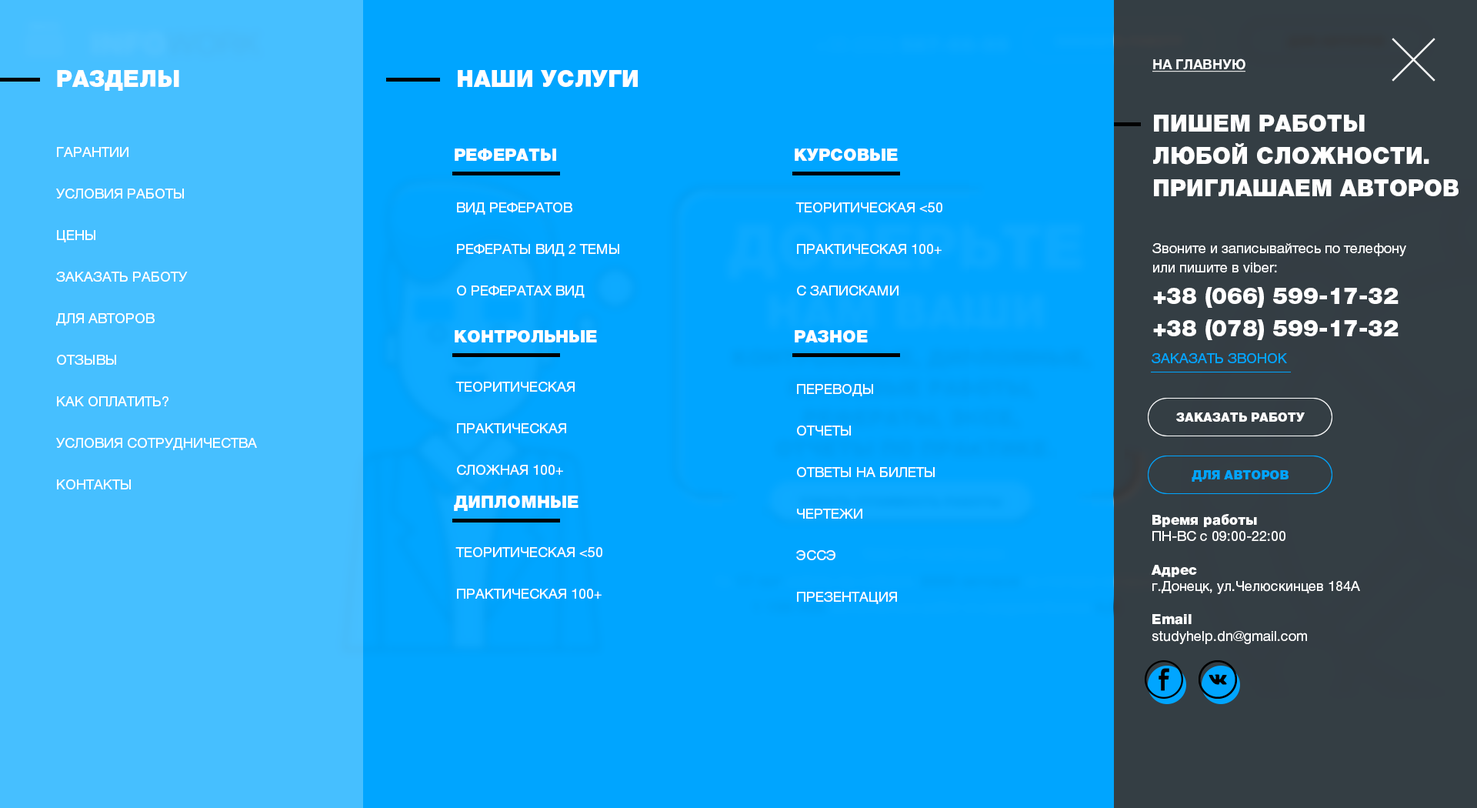
<style>
.page{position:relative;width:1477px;height:808px;background:#00a5ff}
.page>*{position:absolute;margin:0}
.t1{font:13.8px "HelveticaNeueCyr-Bold";color:#ffffff;text-decoration:underline}
.t2{font:23.1px "HelveticaNeueCyr-Black";color:#ffffff}
.t3{font:23.1px/32.3px "HelveticaNeueCyr-Black";color:#ffffff}
.t4{font:13.8px/41.5px "HelveticaNeueCyr-Roman";color:#ffffff}
.t5{font:16.9px "HelveticaNeueCyr-Black";color:#ffffff}
.t6{font:13.8px/19.4px "HelveticaNeueCyr-Roman";color:#ffffff}
.t7{font:13.8px "HelveticaNeueCyr-Roman";color:#00a5ff}
.t8{font:12.3px "HelveticaNeueCyr-Black";color:#ffffff}
.t9{font:12.3px "HelveticaNeueCyr-Black";color:#00a5ff}
.t10{font:13.8px/16.6px "HelveticaNeueCyr-Roman";color:#ffffff}
.t11{font:13.8px/16.6px "HelveticaNeueCyr-Black";color:#ffffff}
</style>
<div class="page">
<p class="t1" style="left:1152px;top:58px;width:93px;height:14px">НА ГЛАВНУЮ</p>
<p class="t2" style="left:57px;top:70px;width:122px;height:21px">РАЗДЕЛЫ</p>
<p class="t2" style="left:458px;top:70px;width:180px;height:17px">НАШИ УСЛУГИ</p>
<p class="t3" style="left:1153px;top:115px;width:305px;height:81px">ПИШЕМ РАБОТЫ ЛЮБОЙ СЛОЖНОСТИ.<br>ПРИГЛАШАЕМ АВТОРОВ</p>
<p class="t4" style="left:56px;top:147px;width:201px;height:342px">ГАРАНТИИ<br>УСЛОВИЯ РАБОТЫ<br>ЦЕНЫ<br>ЗАКАЗАТЬ РАБОТУ<br>ДЛЯ АВТОРОВ<br>ОТЗЫВЫ<br>КАК ОПЛАТИТЬ?<br>УСЛОВИЯ СОТРУДНИЧЕСТВА<br>КОНТАКТЫ</p>
<p class="t5" style="left:455px;top:148px;width:101px;height:13px">РЕФЕРАТЫ</p>
<p class="t5" style="left:794px;top:148px;width:104px;height:13px">КУРСОВЫЕ</p>
<p class="t4" style="left:457px;top:202px;width:162px;height:96px">ВИД РЕФЕРАТОВ <br>РЕФЕРАТЫ ВИД 2 ТЕМЫ<br>О РЕФЕРАТАХ ВИД</p>
<p class="t4" style="left:795px;top:202px;width:147px;height:93px">ТЕОРИТИЧЕСКАЯ &lt;50 <br>ПРАКТИЧЕСКАЯ 100+<br>С ЗАПИСКАМИ</p>
<p class="t6" style="left:1152px;top:243px;width:254px;height:30px">Звоните и записывайтесь по телефону<br>или пишите в viber:</p>
<p class="t2" style="left:1153px;top:287px;width:245px;height:21px">+38 (066) 599-17-32</p>
<p class="t5" style="left:455px;top:330px;width:142px;height:12px">КОНТРОЛЬНЫЕ</p>
<p class="t5" style="left:794px;top:330px;width:74px;height:12px">РАЗНОЕ</p>
<p class="t2" style="left:1153px;top:319px;width:245px;height:21px">+38 (078) 599-17-32</p>
<p class="t7" style="left:1151px;top:353px;width:136px;height:10px">ЗАКАЗАТЬ ЗВОНОК</p>
<p class="t4" style="left:455px;top:381px;width:120px;height:94px">ТЕОРИТИЧЕСКАЯ <br>ПРАКТИЧЕСКАЯ<br>СЛОЖНАЯ 100+</p>
<p class="t4" style="left:796px;top:384px;width:138px;height:220px">ПЕРЕВОДЫ<br>ОТЧЕТЫ<br>ОТВЕТЫ НА БИЛЕТЫ<br>ЧЕРТЕЖИ<br>ЭССЭ<br>ПРЕЗЕНТАЦИЯ</p>
<p class="t8" style="left:1176px;top:412px;width:128px;height:9px">ЗАКАЗАТЬ РАБОТУ</p>
<p class="t9" style="left:1191px;top:470px;width:97px;height:11px">ДЛЯ АВТОРОВ</p>
<p class="t5" style="left:454px;top:495px;width:124px;height:16px">ДИПЛОМНЫЕ</p>
<p class="t10" style="left:1151px;top:514px;width:209px;height:130px"><span class="t11">Время работы</span> <br>ПН-ВС с 09:00-22:00<br><br><span class="t11">Адрес<br></span>г.Донецк, ул.Челюскинцев 184А<br><br><span class="t11">Email<br></span>studyhelp.dn@gmail.com</p>
<p class="t4" style="left:455px;top:547px;width:147px;height:51px">ТЕОРИТИЧЕСКАЯ &lt;50 <br>ПРАКТИЧЕСКАЯ 100+</p>
</div>
